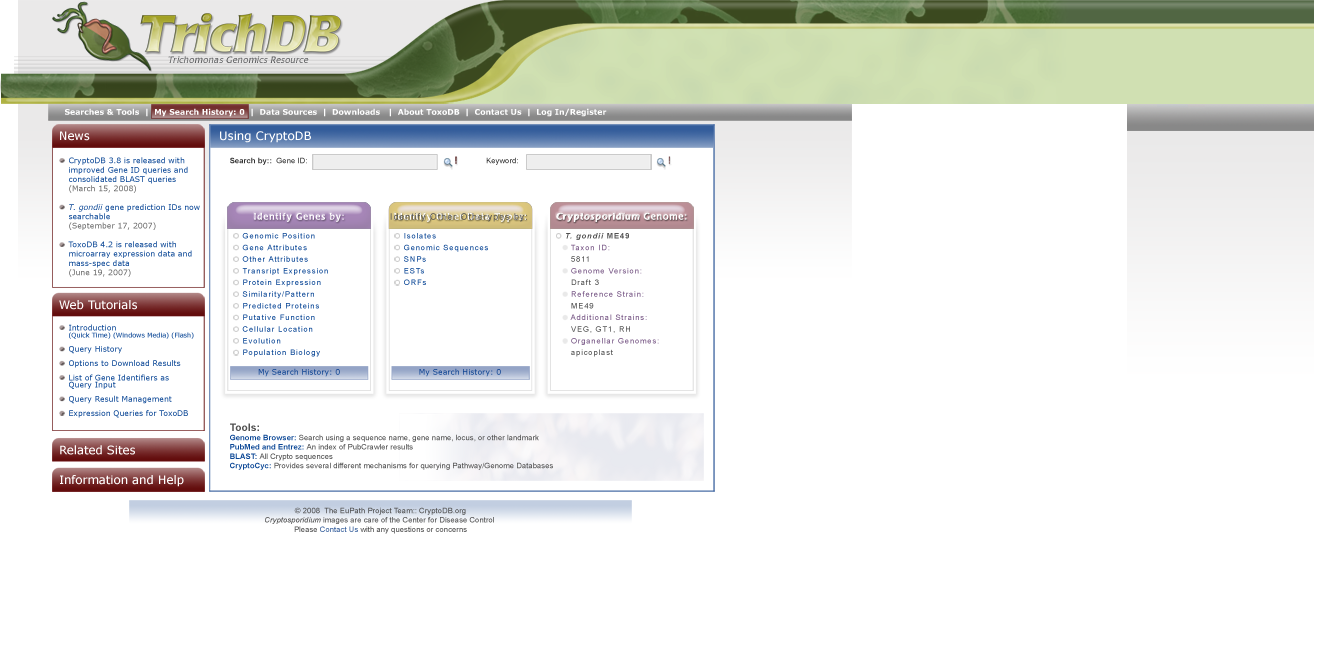
<style>
.page{position:relative;width:1332px;height:648px;background:#ffffff}
.page>*{position:absolute;margin:0}
.t1{font:9.3px "LaudatioC";letter-spacing:0.01em;color:#5d5e60}
.t2{font:7.8px "Verdana-Bold";color:#ffffff}
.t3{font:11.7px "Verdana";color:#ffffff}
.t4{font:7.8px "Verdana"}
.t5{font:7.8px "Verdana-Italic"}
.t6{font:7.8px "ArialMT";color:#333333}
.t7{font:7.8px "Arial-BoldMT";color:#333333}
.t8{font:9.1px "LaudatioC";letter-spacing:0.1em;color:#ffffff}
.t9{font:9.1px "ArialMT";letter-spacing:0.1em;color:#515151}
.t10{font:9.1px "LaudatioC";letter-spacing:0.1em}
.t11{font:7.8px/11.7px "ArialMT";letter-spacing:0.1em;color:#0b4796}
.t12{font:7.8px/11.7px "ArialMT";letter-spacing:0.1em}
.t13{font:7.8px/11.7px "ArialMT";letter-spacing:0.1em;color:#765584}
.t14{font:7.8px/11.7px "Arial-BoldItalicMT";letter-spacing:0.1em;color:#515151}
.t15{font:7.8px/11.7px "Arial-BoldMT";letter-spacing:0.1em;color:#515151}
.t16{font:7.8px/11.7px "ArialMT";letter-spacing:0.1em;color:#515151}
.t17{font:7.8px/7.1px "Verdana";color:#0b4796}
.t18{font:6.5px/7.1px "Verdana";color:#0b4796}
.t19{font:7.8px "Verdana";color:#0b4796}
.t20{font:7.8px "ArialMT";color:#515151}
.t21{font:10.4px "Arial-BoldMT";color:#515151}
.t22{font:7.8px "Arial-BoldMT";color:#0b4796}
.t23{font:7.8px "ArialMT";color:#505050}
.t24{font:7.8px "Arial-ItalicMT";color:#505050}
.t25{font:7.8px "ArialMT";color:#345d9b}
</style>
<div class="page">
<p class="t1" style="left:168px;top:56px;width:141px;height:7px">Trichomonas Genomics Resource</p>
<p class="t2" style="left:65px;top:108px;width:542px;height:9px">Searches &amp; Tools  |  My Search History: 0  |  Data Sources  |  Downloads   |  About ToxoDB  |  Contact Us  |  Log In/Register</p>
<p class="t3" style="left:60px;top:131px;width:251px;height:12px">News          Using CryptoDB</p>
<p class="t4" style="left:68px;top:157px;width:132px;height:120px">CryptoDB 3.8 is released with <br>improved Gene ID queries and<br>consolidated BLAST queries<br>(March 15, 2008)<br><br><span class="t5">T. gondii </span>gene prediction IDs now<br>searchable<br>(September 17, 2007)<br><br>ToxoDB 4.2 is released with<br>microarray expression data and<br>mass-spec data<br>(June 19, 2007)</p>
<p class="t6" style="left:230px;top:157px;width:288px;height:8px"><span class="t7">Search by::</span>  Gene ID:           Keyword:</p>
<p class="t8" style="left:254px;top:212px;width:90px;height:10px">Identify Genes by:</p>
<p class="t9" style="left:390px;top:213px;width:137px;height:9px">Identify Other Otherypes by:</p>
<p class="t10" style="left:394px;top:212px;width:132px;height:10px">Identify Other Data Types:</p>
<p class="t8" style="left:556px;top:212px;width:131px;height:10px">Cryptosporidium Genome:</p>
<p class="t11" style="left:242px;top:233px;width:86px;height:124px">Genomic Position<br>Gene Attributes<br>Other Attributes<br>Transript Expression<br>Protein Expression<br>Similarity/Pattern<br>Predicted Proteins<br>Putative Function<br>Cellular Location<br>Evolution<br>Population Biology</p>
<p class="t12" style="left:404px;top:233px;width:84px;height:52px">Isolates<br>Genomic Sequences<br>SNPs<br>ESTs<br>ORFs</p>
<p class="t13" style="left:566px;top:233px;width:93px;height:124px"><span class="t14">T. gondii</span><span class="t15"> ME49<br>  </span>Taxon ID: <br><span class="t16">  5811<br>  </span>Genome Version: <br><span class="t16">  Draft 3<br>  </span>Reference Strain: <br><span class="t16">  ME49<br>  </span>Additional Strains: <br><span class="t16">  VEG, GT1, RH<br>  </span>Organellar Genomes: <br><span class="t16">  apicoplast</span></p>
<p class="t3" style="left:59px;top:300px;width:78px;height:10px">Web Tutorials</p>
<p class="t17" style="left:69px;top:324px;width:125px;height:94px">Introduction <br><span class="t18">(Quick Time) (Windows Media) (Flash)<br></span><br>Query History<br><br>Options to Download Results<br><br>List of Gene Identifiers as<br>Query Input<br><br>Query Result Management<br><br>Expression Queries for ToxoDB</p>
<p class="t19" style="left:258px;top:368px;width:82px;height:9px">My Search History: 0</p>
<p class="t19" style="left:419px;top:368px;width:82px;height:9px">My Search History: 0</p>
<p class="t20" style="left:230px;top:423px;width:323px;height:47px"><span class="t21">Tools:<br></span><span class="t22">Genome Browser: </span>Search using a sequence name, gene name, locus, or other landmark<br><span class="t22">PubMed and Entrez: </span>An index of PubCrawler results<br><span class="t22">BLAST: </span>All Crypto sequences<br><span class="t22">CryptoCyc:</span> Provides several different mechanisms for querying Pathway/Genome Databases</p>
<p class="t3" style="left:60px;top:445px;width:75px;height:10px">Related Sites</p>
<p class="t3" style="left:60px;top:475px;width:124px;height:12px">Information and Help</p>
<p class="t23" style="left:265px;top:507px;width:229px;height:27px;text-align:center">© 2008  The EuPath Project Team:: CryptoDB.org<br><span class="t24">Cryptosporidium </span>images are care of the Center for Disease Control <br>Please <span class="t25">Contact Us</span> with any questions or concerns</p>
</div>
